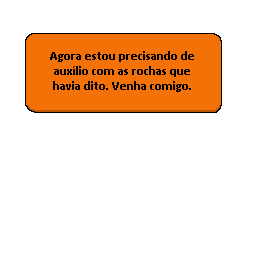
<style>
.page{position:relative;width:256px;height:256px;background:#ffffff}
.page>*{position:absolute;margin:0}
.t1{font:12.5px "Calibri-Bold";color:#000000}
</style>
<div class="page">
<p class="t1" style="left:50px;top:51px;width:144px;height:41px;text-align:center">Agora estou precisando de auxílio com as rochas que havia dito. Venha comigo.</p>
</div>
